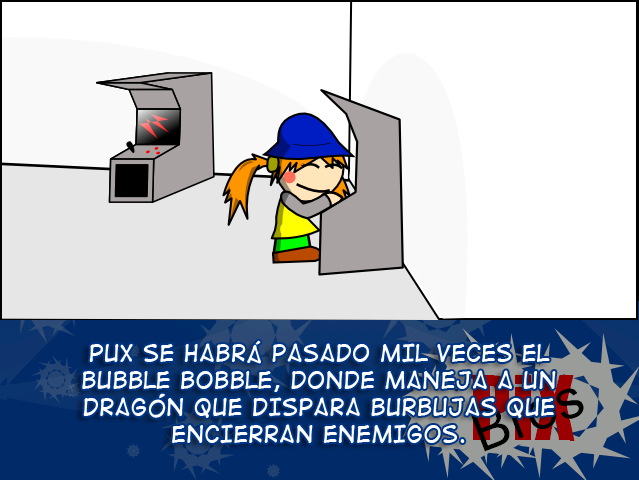
<style>
.page{position:relative;width:639px;height:480px;background:#ffffff}
.page>*{position:absolute;margin:0}
.t1{font:22.4px "DigitalStrip2";color:#ffffff}
</style>
<div class="page">
<p class="t1" style="left:82px;top:340px;width:474px;height:104px;text-align:center">PuX se habrá pasado mil veces el <br>Bubble Bobble, donde maneja a un <br>dragón que dispara burbujas que <br>encierran enemigos.</p>
</div>
